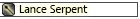
<style>
.page{position:relative;width:140px;height:19px;background:#ffffff}
.page>*{position:absolute;margin:0}
.t1{font:10.9px "LaoUI";color:#000000}
</style>
<div class="page">
<p class="t1" style="left:19px;top:5px;width:69px;height:10px">Lance Serpent</p>
</div>
